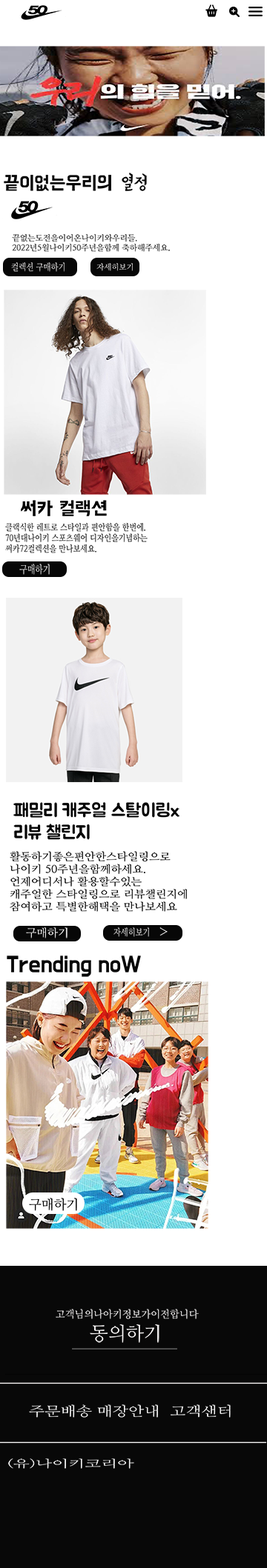
<style>
.page{position:relative;width:267px;height:1568px;background:#ffffff}
.page>*{position:absolute;margin:0}
.t1{font:18.8px "BMYEONSUNG-OTF";color:#070707}
.t2{font:18.8px "BMHANNA11yrsoldOTF";color:#070707}
.t3{font:8.1px "NanumMyeongjo";color:#070707}
.t4{font:8.7px "NanumMyeongjo";scale:0.9 1}
.t5{font:7.7px "NanumMyeongjo";color:#f2f0f0}
.t6{font:18.8px "BMHANNA11yrsoldOTF";color:#000000}
.t7{font:8.9px "NanumMyeongjo";color:#0c0c0c;scale:0.85 1}
.t8{font:10.5px "NanumMyeongjo";color:#fafafa;scale:0.77 1}
.t9{font:18.3px "BMJUAOTF";color:#060606}
.t10{font:10.4px "NanumMyeongjo";color:#000000;scale:1.08 1}
.t11{font:10.9px "NanumMyeongjo";color:#fbfafa;scale:1.03 1}
.t12{font:9.4px "NanumMyeongjo";color:#fbfafa;scale:0.81 1}
.t13{font:8.4px "NanumMyeongjo";color:#fbfafa;scale:2.23 1}
.t14{font:18.8px "BMDoHyeon-OTF";color:#060606}
.t15{font:13.1px "NanumMyeongjo";color:#060606}
.t16{font:10px "NanumMyeongjo";color:#fdfbfb}
.t17{font:18.8px "NanumMyeongjo";color:#fdfbfb}
.t18{font:13.1px "NanumMyeongjo";color:#f2f2f2;scale:1.27 1}
.t19{font:10.4px "NanumMyeongjo";color:#f2f2f2;scale:1.64 1}
</style>
<div class="page">
<p class="t1" style="left:121px;top:173px;width:26px;height:18px">열정</p>
<p class="t2" style="left:4px;top:175px;width:107px;height:16px">끝이없는우리의</p>
<p class="t3" style="left:12px;top:234px;width:158px;height:18px">끝없는도전을이어온나이키와우리들.<br>2022년5월나이키50주년을함께 축하해주세요.</p>
<p class="t4" style="left:11px;top:262px;width:53px;height:10px">컬렉션 구매하기</p>
<p class="t5" style="left:96px;top:263px;width:37px;height:8px">자세히보기</p>
<p class="t6" style="left:21px;top:500px;width:32px;height:16px">써카</p>
<p class="t6" style="left:60px;top:500px;width:47px;height:16px">컬랙션</p>
<p class="t7" style="left:5px;top:523px;width:142px;height:30px">클랙식한 레트로 스타일과 편안함을 한번에.<br>70년대나이키 스포츠웨어 디자인을기념하는<br>써카72컬렉션을 만나보세요.</p>
<p class="t8" style="left:19px;top:564px;width:31px;height:11px">구매하기</p>
<p class="t9" style="left:13px;top:802px;width:166px;height:38px">패밀리 캐주얼 스탈이링x<br>리뷰 챌린지</p>
<p class="t10" style="left:10px;top:851px;width:177px;height:61px">활동하기좋은편안한스타일링으로<br>나이키 50주년을함께하세요.<br>언제어디서나 활용할수있는<br>캐주얼한 스타일링으로 리뷰챌린지에<br>참여하고 특별한해택을 만나보세요</p>
<p class="t11" style="left:26px;top:927px;width:41px;height:11px">구매하기</p>
<p class="t12" style="left:113px;top:927px;width:36px;height:10px">자세히보기</p>
<p class="t13" style="left:159px;top:927px;width:8px;height:8px">&gt;</p>
<p class="t14" style="left:7px;top:955px;width:134px;height:22px">Trending noW</p>
<p class="t15" style="left:29px;top:1198px;width:48px;height:13px">구매하기</p>
<p class="t16" style="left:56px;top:1309px;width:142px;height:10px">고객님의나아키정보가이전합니다</p>
<p class="t17" style="left:90px;top:1324px;width:69px;height:19px">동의하기</p>
<p class="t18" style="left:29px;top:1404px;width:201px;height:14px">주문배송 매장안내  고객샌터</p>
<p class="t19" style="left:8px;top:1458px;width:126px;height:11px">(유)나이키코리아</p>
</div>
